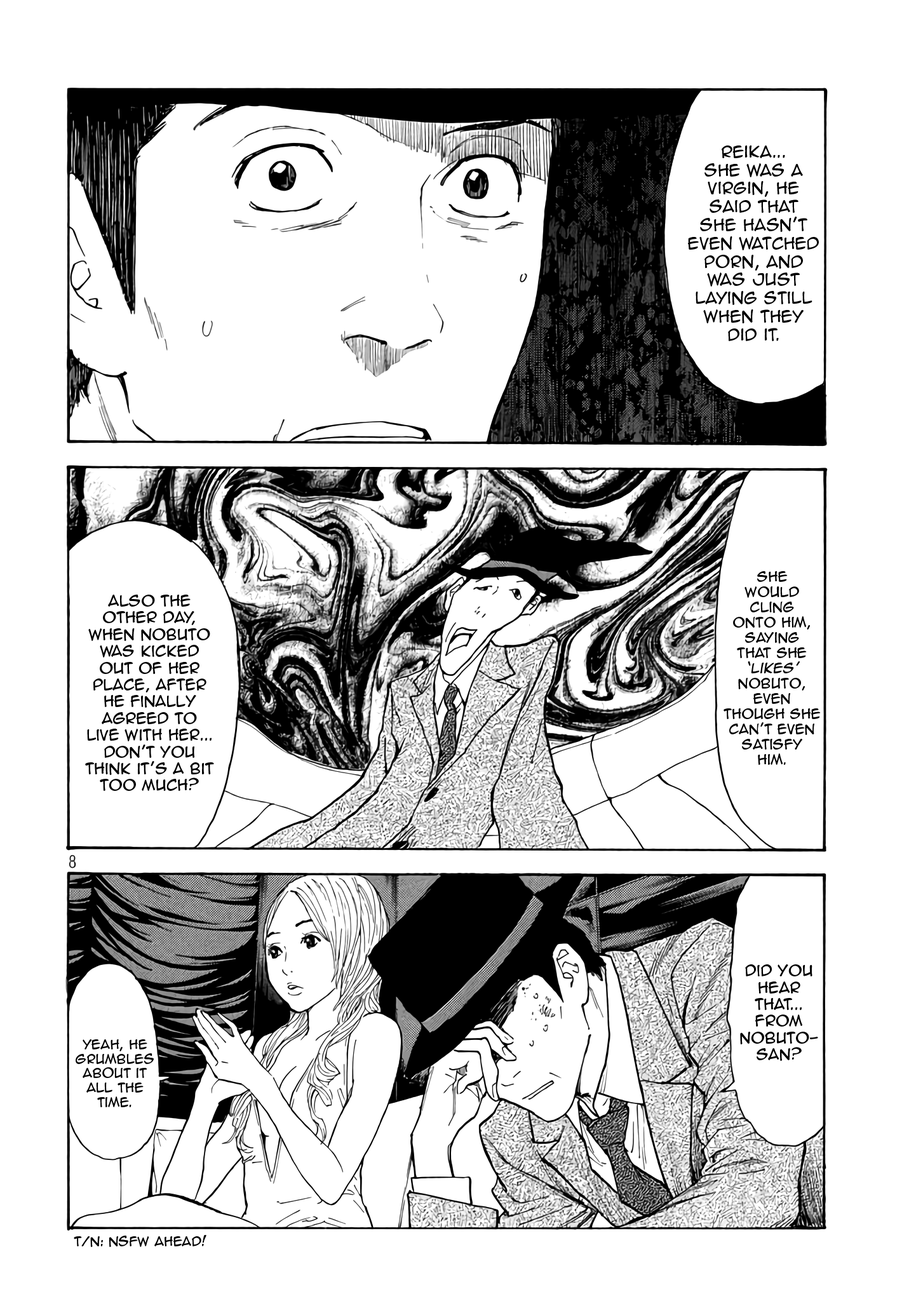
<style>
.page{position:relative;width:916px;height:1301px;background:#ffffff}
.page>*{position:absolute;margin:0}
.t1{font:15.3px "AnimeAce2.0BB";color:#000000}
.t2{font:12.7px "AnimeAce2.0BB";color:#000000}
.t3{font:12.7px "AnimeAce2.0BB";color:#000000;font-style:italic}
.t4{font:14px "AnimeAce2.0BB";color:#000000}
.t5{font:12.1px "AnimeAce2.0BB";color:#000000}
</style>
<div class="page">
<p class="t1" style="left:688px;top:146px;width:131px;height:195px;text-align:center">Reika...<br>She was A<br>virgin, He<br>said that<br>she hasn’t<br>even watched<br>porn, and<br>was just<br>laying still<br>when they<br>did it.</p>
<p class="t2" style="left:724px;top:571px;width:97px;height:194px;text-align:center">SHe<br>would<br>cling<br>onto him,<br>saying<br>that SHe<br><span class="t3">‘likes’ </span>Nobuto,<br>even <br>though she can’t even<br>satisfy<br>him.</p>
<p class="t4" style="left:85px;top:595px;width:129px;height:196px;text-align:center">also the<br>other day, <br>when nobuto was kicked out of her place, After he finally <br>agreed to <br>live with her...<br>don’t you think it’s a bit too much?</p>
<p class="t4" style="left:740px;top:965px;width:78px;height:96px;text-align:center">Did you<br>Hear<br>that...<br>from<br>nobuto-<br>san?</p>
<p class="t5" style="left:76px;top:1040px;width:78px;height:68px;text-align:center">Yeah, he<br>grumbles<br> about it <br>all the<br>time.</p>
<p class="t5" style="left:74px;top:1235px;width:133px;height:12px">T/N: NSFW Ahead!</p>
</div>
